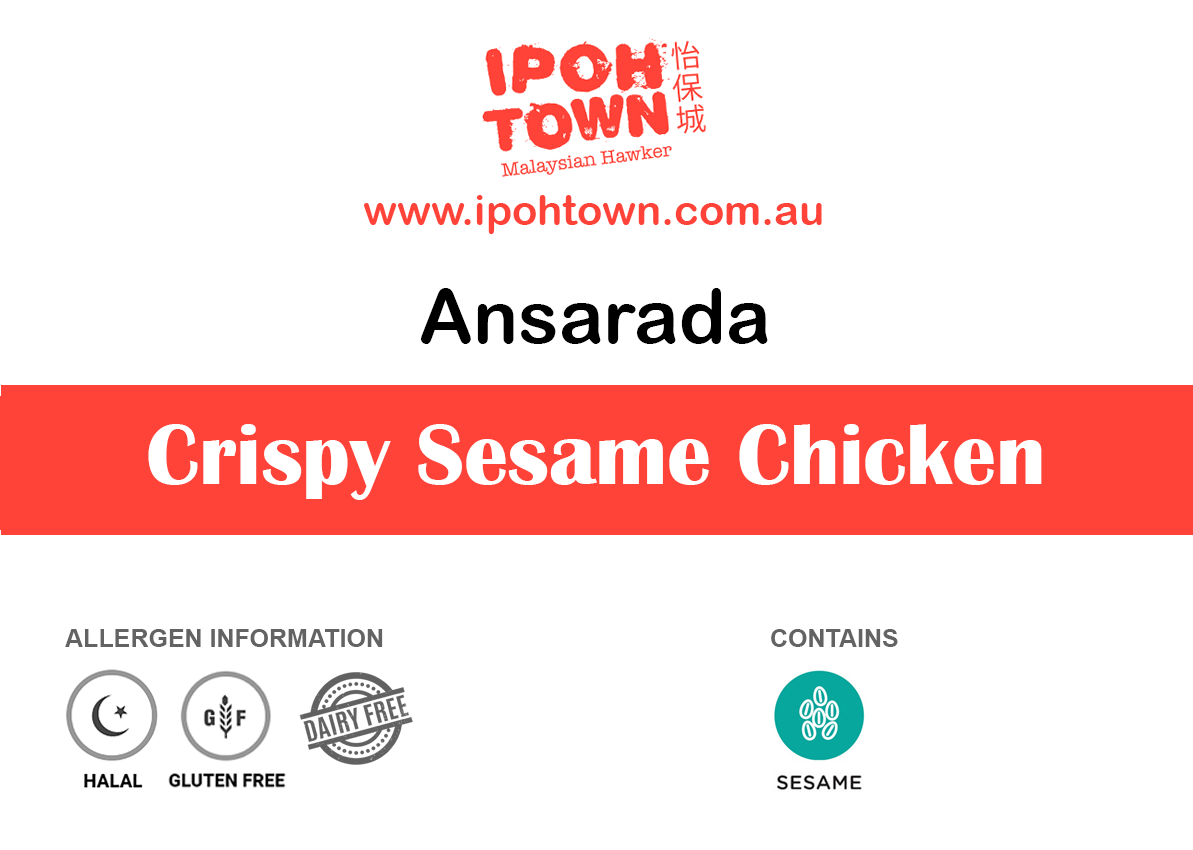
<style>
.page{position:relative;width:1193px;height:850px;background:#ffffff}
.page>*{position:absolute;margin:0}
.t1{font:41.7px "ArialRoundedMTBold";color:#ff4338}
.t2{font:75px "ArialRoundedMTBold";color:#000000}
.t3{font:87.5px "BritannicBold";color:#ffffff}
.t4{font:25px "Arial-BoldMT";color:#636363}
</style>
<div class="page">
<p class="t1" style="left:364px;top:195px;width:458px;height:39px">www.ipohtown.com.au</p>
<p class="t2" style="left:421px;top:288px;width:347px;height:56px">Ansarada</p>
<p class="t3" style="left:148px;top:424px;width:894px;height:76px">Crispy Sesame Chicken</p>
<p class="t4" style="left:65px;top:629px;width:318px;height:18px">ALLERGEN INFORMATION</p>
<p class="t4" style="left:771px;top:629px;width:127px;height:18px">CONTAINS</p>
</div>
